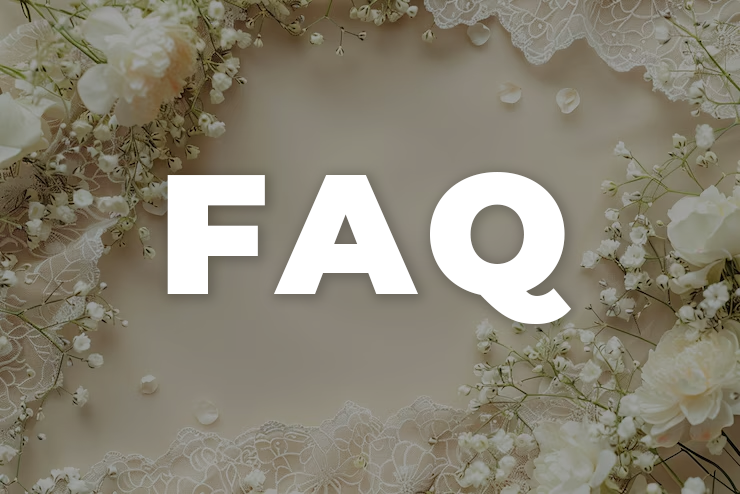
<style>
.page{position:relative;width:740px;height:494px}
.page>*{position:absolute;margin:0}
.t1{font:292.5px "Montserrat-Black";letter-spacing:0.075em;color:#ffffff}
</style>
<div class="page">
<p class="t1" style="left:167px;top:172px;width:404px;height:152px">FAQ</p>
</div>
